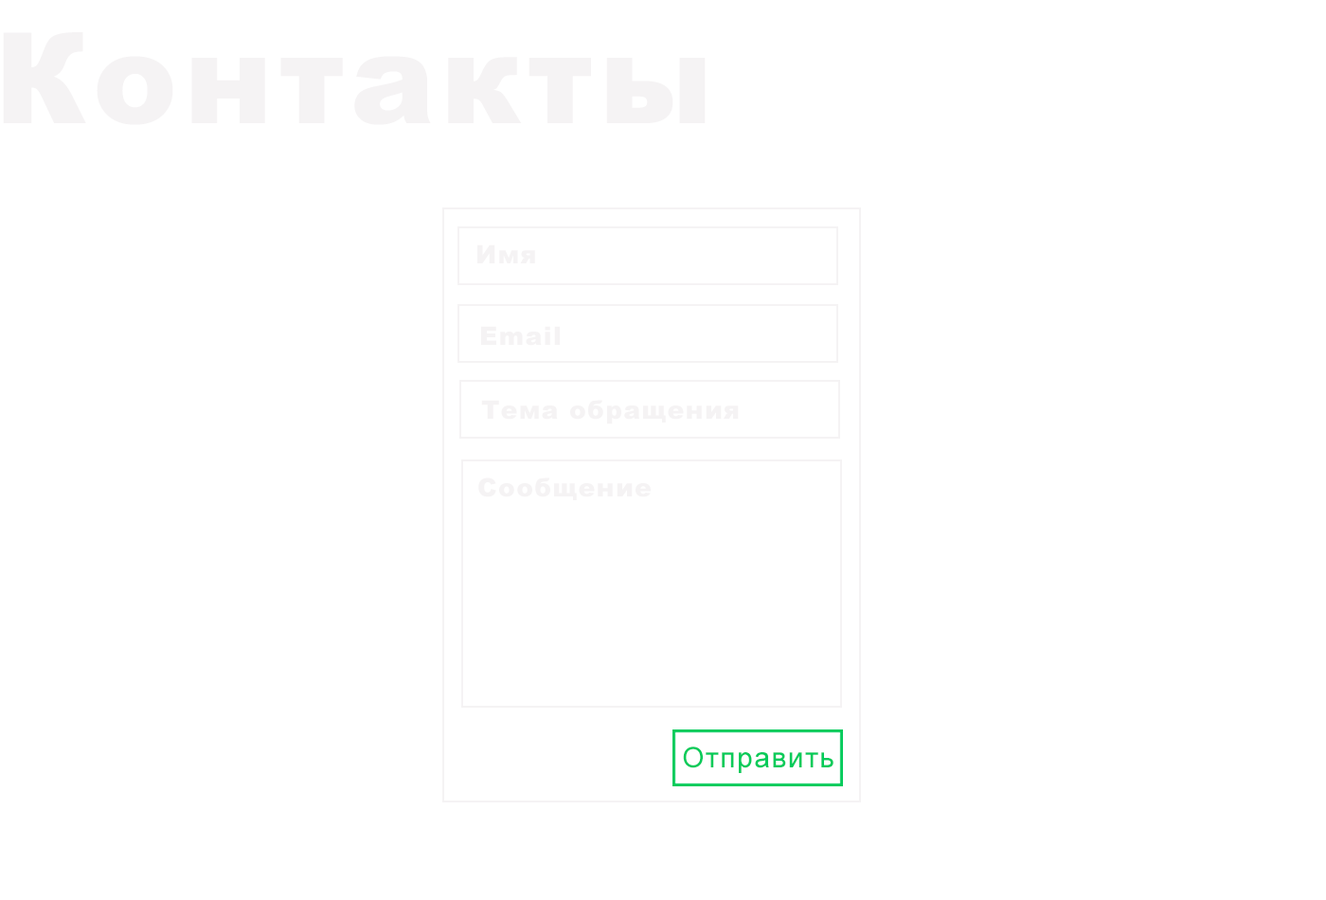
<style>
.page{position:relative;width:1326px;height:900px;background:#ffffff}
.page>*{position:absolute;margin:0}
.t1{font:126.2px "Arial-Black";letter-spacing:0.05em;color:#f5f3f4}
.t2{font:25.2px "Arial-Black";letter-spacing:0.05em;color:#f5f3f4}
.t3{font:28.4px "ArialMT";letter-spacing:0.05em;color:#02cb5a}
</style>
<div class="page">
<p class="t1" style="left:3px;top:32px;width:702px;height:93px">Контакты</p>
<p class="t2" style="left:477px;top:244px;width:58px;height:19px">Имя</p>
<p class="t2" style="left:481px;top:326px;width:79px;height:20px">Email</p>
<p class="t2" style="left:481px;top:400px;width:258px;height:24px">Тема обращения</p>
<p class="t2" style="left:478px;top:477px;width:173px;height:23px">Сообщение</p>
<p class="t3" style="left:683px;top:746px;width:150px;height:27px">Отправить</p>
</div>
